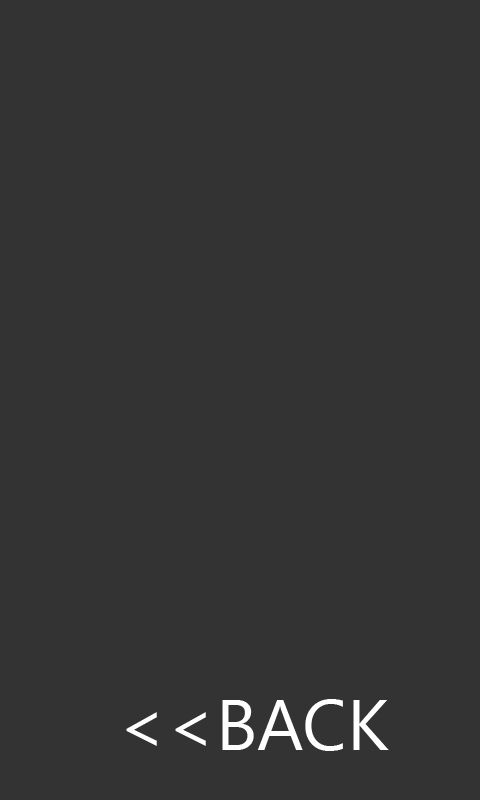
<style>
.page{position:relative;width:480px;height:800px;background:#333333}
.page>*{position:absolute;margin:0}
.t1{font:72px "SegoeUIHistoric";color:#ffffff}
</style>
<div class="page">
<p class="t1" style="left:126px;top:699px;width:263px;height:52px">&lt;&lt;BACK</p>
</div>
